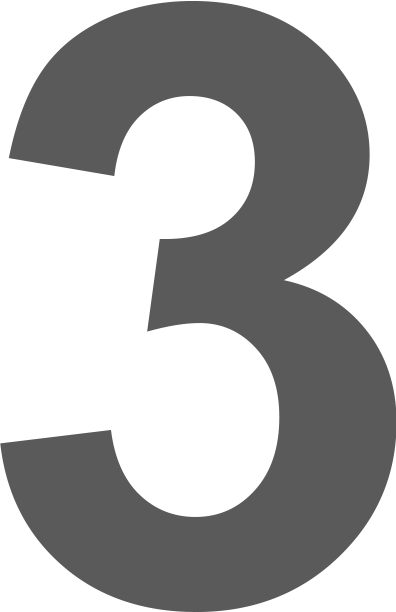
<style>
.page{position:relative;width:396px;height:612px;background:#ffffff}
.page>*{position:absolute;margin:0}
.t1{font:833.3px "Arial-BoldMT";letter-spacing:0.04em;color:#5a5a5a}
</style>
<div class="page">
<p class="t1" style="left:0px;top:1px;width:397px;height:611px">3</p>
</div>
